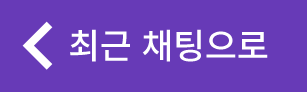
<style>
.page{position:relative;width:307px;height:92px;background:#673ab7}
.page>*{position:absolute;margin:0}
.t1{font:35px "NotoSansCJKkr-Medium";letter-spacing:-0.01em;color:#ffffff}
</style>
<div class="page">
<p class="t1" style="left:70px;top:29px;width:198px;height:33px">최근 채팅으로</p>
</div>
